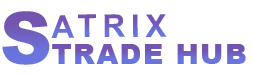
<style>
.page{position:relative;width:253px;height:75px;background:#ffffff}
.page>*{position:absolute;margin:0}
.t1{font:123.9px "Arial-Black";letter-spacing:0.06em;text-transform:uppercase}
.t2{font:54.1px "Arial-BoldMT";letter-spacing:0.18em;color:#715cba;text-transform:uppercase}
.t3{font:47.6px "Arial-Black";letter-spacing:0.06em;color:#715cba;text-transform:uppercase}
</style>
<div class="page">
<p class="t1" style="left:2px;top:11px;width:48px;height:54px">S</p>
<p class="t2" style="left:51px;top:14px;width:116px;height:24px">atrix</p>
<p class="t3" style="left:52px;top:44px;width:194px;height:20px">Trade Hub</p>
</div>
